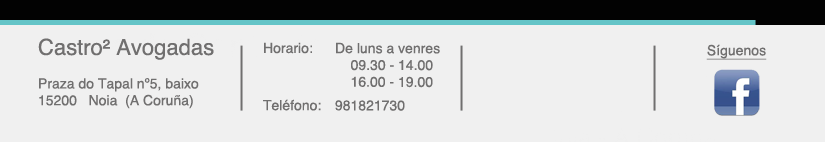
<style>
.page{position:relative;width:825px;height:142px;background:#f0f0f0}
.page>*{position:absolute;margin:0}
.t1{font:14px "Helvetica";color:#706f6f}
.t2{font:22px "Helvetica";color:#706f6f}
.t3{font:14px "Helvetica";color:#706f6f;text-decoration:underline}
</style>
<div class="page">
<p class="t1" style="left:38px;top:38px;width:176px;height:71px"><span class="t2">Castro² Avogadas<br></span><br>Praza do Tapal nº5, baixo<br>15200   Noia  (A Coruña)</p>
<p class="t1" style="left:263px;top:42px;width:177px;height:69px">Horario: De luns a venres<br>      09.30 - 14.00<br>      16.00 - 19.00<br><br>Teléfono:  981821730</p>
<p class="t3" style="left:706px;top:44px;width:61px;height:16px">Síguenos</p>
</div>
